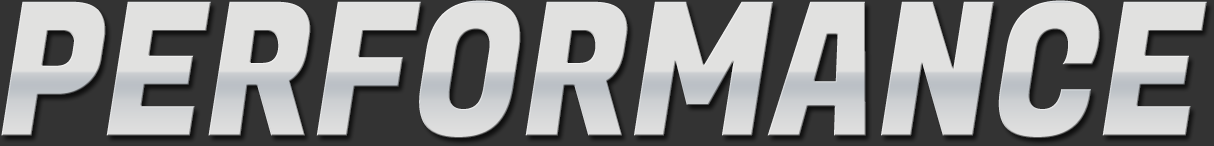
<style>
.page{position:relative;width:1214px;height:146px;background:#333333}
.page>*{position:absolute;margin:0}
.t1{font:185.2px "FugazOne-Regular";color:#dfdfdf;scale:0.89 1}
</style>
<div class="page">
<p class="t1" style="left:1px;top:0px;width:1206px;height:138px">PERFORMANCE</p>
</div>
